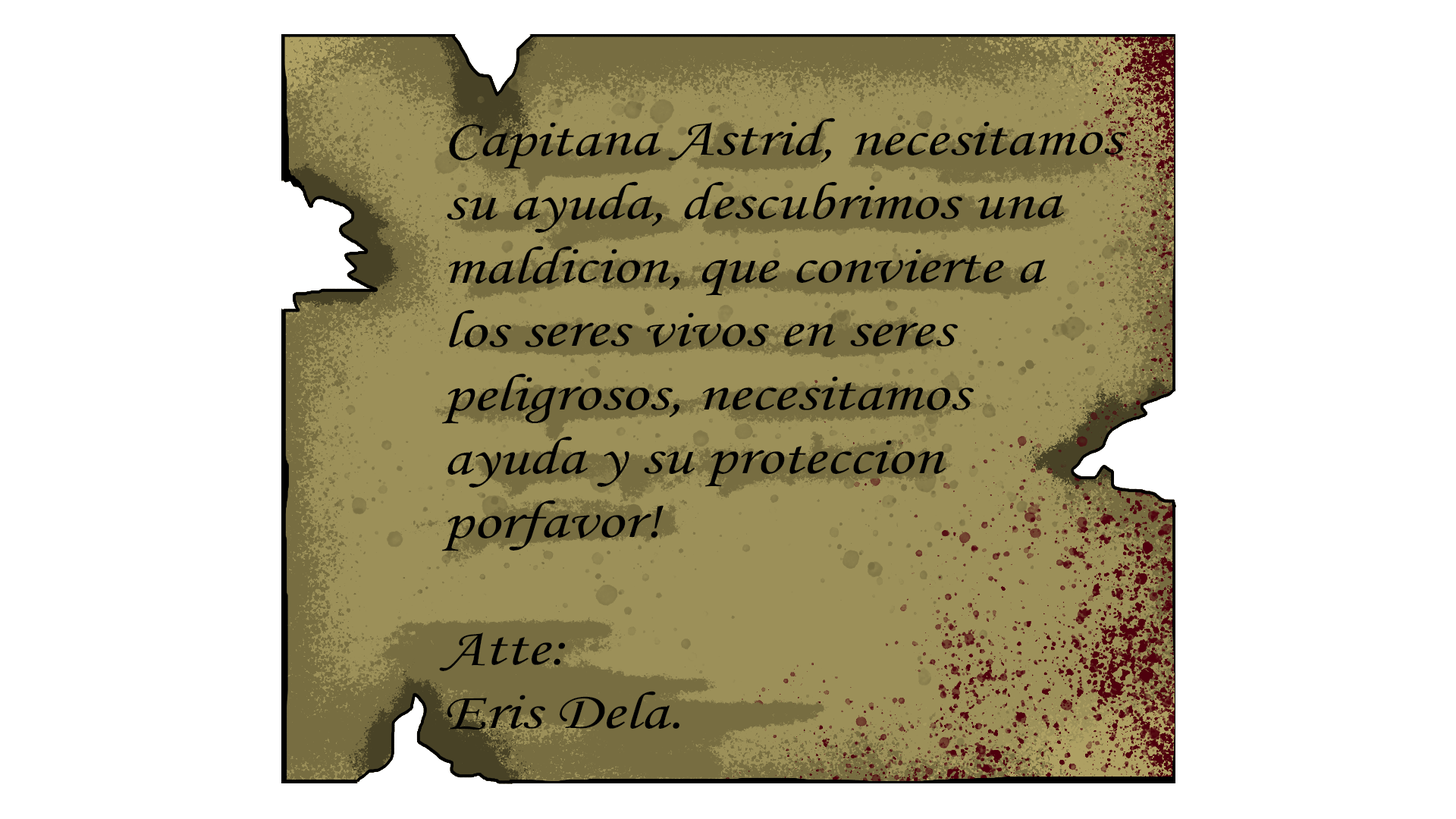
<style>
.page{position:relative;width:1456px;height:819px;background:#ffffff}
.page>*{position:absolute;margin:0}
.t1{font:53.1px "MonotypeCorsiva";color:#000000;scale:1.25 1}
</style>
<div class="page">
<p class="t1" style="left:439px;top:118px;width:687px;height:612px">Capitana Astrid, necesitamos <br>su ayuda, descubrimos una <br>maldicion, que convierte a <br>los seres vivos en seres <br>peligrosos, necesitamos <br>ayuda y su proteccion<br>porfavor! <br><br>Atte:<br>Eris Dela.</p>
</div>
